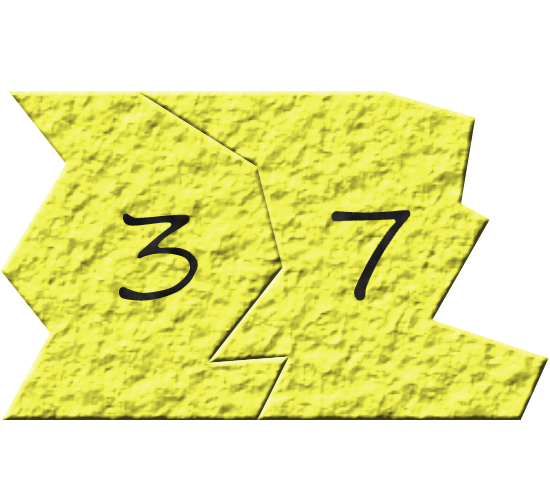
<style>
.page{position:relative;width:550px;height:500px;background:#ffffff}
.page>*{position:absolute;margin:0}
.t1{font:140px "SegoeScript";color:#242424}
.t2{font:140px "SegoeScript"}
</style>
<div class="page">
<p class="t1" style="left:330px;top:209px;width:82px;height:93px">7</p>
<p class="t2" style="left:117px;top:211px;width:83px;height:92px">3</p>
</div>
